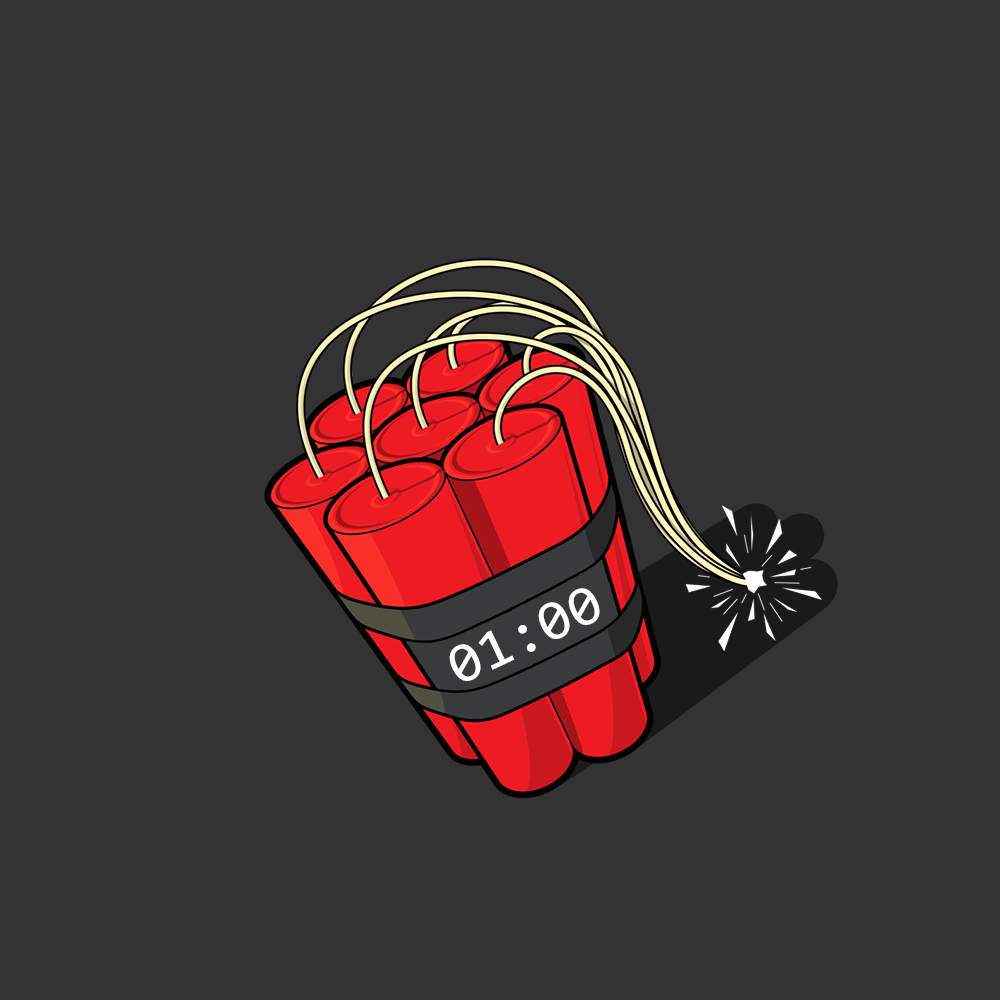
<style>
.page{position:relative;width:1000px;height:1000px;background:#333333}
.page>*{position:absolute;margin:0}
.t1{font:56.8px "Consolas";color:#ffffff;scale:1.05 1}
</style>
<div class="page">
<p class="t1" style="left:449px;top:588px;width:151px;height:93px;rotate:-25deg">01:00</p>
</div>
